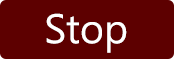
<style>
.page{position:relative;width:174px;height:59px;background:#5d0000}
.page>*{position:absolute;margin:0}
.t1{font:38px "MicrosoftJhengHeiUIRegular";color:#ffffff}
</style>
<div class="page">
<p class="t1" style="left:46px;top:13px;width:81px;height:40px">Stop</p>
</div>
